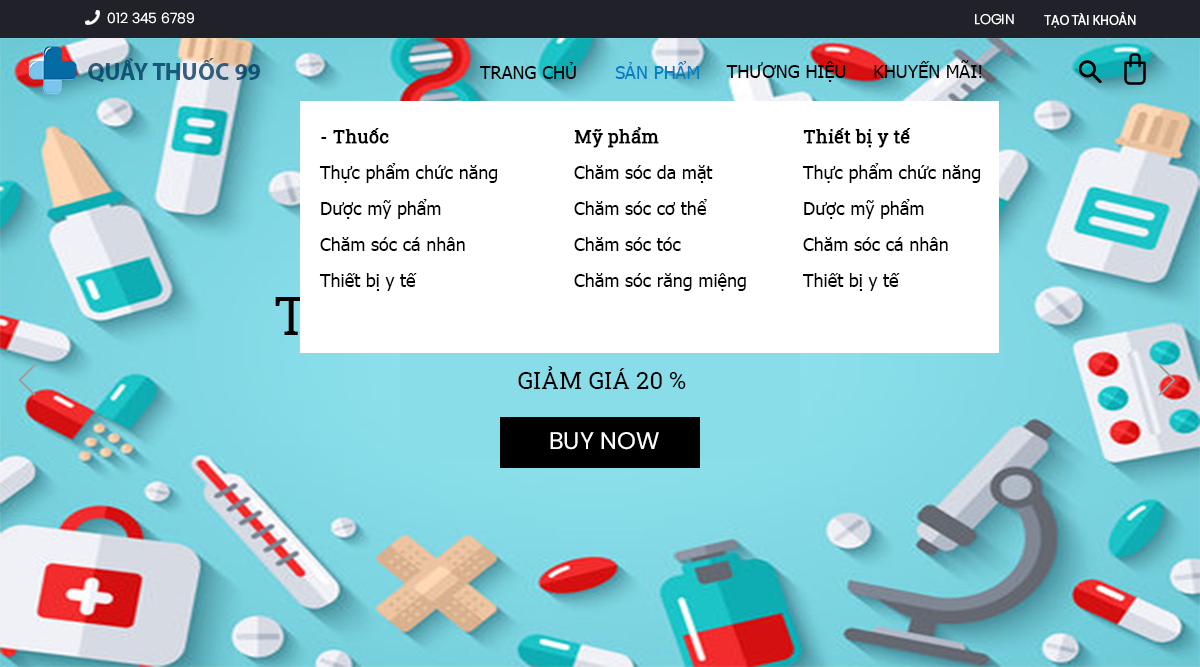
<style>
.page{position:relative;width:1200px;height:667px;background:#ffffff}
.page>*{position:absolute;margin:0}
.t1{font:14px "Poppins-Light";color:#ffffff}
.t2{font:14px "MyriadPro-Regular";color:#ffffff}
.t3{font:24px "MyriadPro-Bold"}
.t4{font:18px "Tahoma";color:#000000}
.t5{font:18px "Tahoma";color:#037ec3}
.t6{font:18px/36px "Tahoma";color:#000000}
.t7{font:18px/36px "RobotoSlab-Regular";color:#000000;font-weight:bold}
.t8{font:24px "RobotoSlab-Regular";color:#000000}
</style>
<div class="page">
<p class="t1" style="left:107px;top:12px;width:87px;height:12px">012 345 6789</p>
<p class="t1" style="left:975px;top:14px;width:39px;height:11px">LOGIN</p>
<p class="t2" style="left:1044px;top:12px;width:92px;height:16px"><span class="t1">T</span>ẠO TÀI KHOẢN</p>
<p class="t3" style="left:88px;top:58px;width:172px;height:25px">QUẦY THUỐC 99</p>
<p class="t4" style="left:479px;top:62px;width:97px;height:17px">TRANG CHỦ</p>
<p class="t5" style="left:615px;top:61px;width:85px;height:18px">SẢN PHẨM</p>
<p class="t4" style="left:726px;top:61px;width:120px;height:21px">THƯƠNG HIỆU</p>
<p class="t4" style="left:874px;top:60px;width:108px;height:18px">KHUYẾN MÃI!</p>
<p class="t6" style="left:319px;top:128px;width:179px;height:163px"><span class="t7">- Thuốc<br></span>Thực phẩm chức năng<br>Dược mỹ phẩm<br>Chăm sóc cá nhân<br>Thiết bị y tế</p>
<p class="t6" style="left:574px;top:127px;width:172px;height:164px"><span class="t7">Mỹ phẩm<br></span>Chăm sóc da mặt<br>Chăm sóc cơ thể<br>Chăm sóc tóc<br>Chăm sóc răng miệng</p>
<p class="t6" style="left:802px;top:128px;width:179px;height:163px"><span class="t7">Thiết bị y tế<br></span>Thực phẩm chức năng<br>Dược mỹ phẩm<br>Chăm sóc cá nhân<br>Thiết bị y tế</p>
<p class="t8" style="left:518px;top:366px;width:168px;height:23px">GIẢM GIÁ 20 %</p>
</div>
